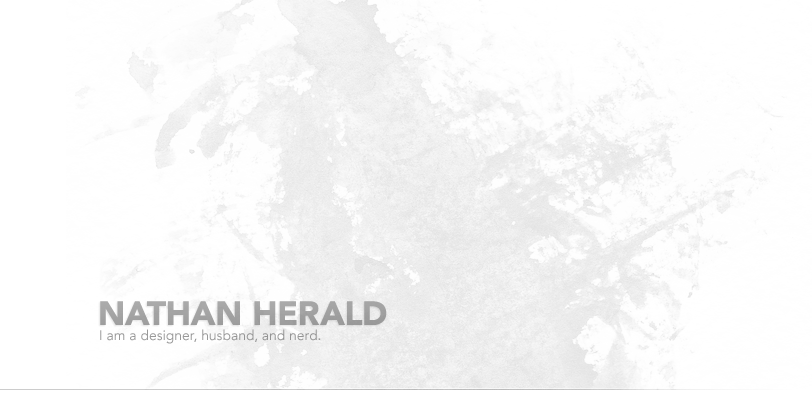
<style>
.page{position:relative;width:812px;height:400px;background:#ffffff}
.page>*{position:absolute;margin:0}
.t1{font:33.3px "AvenirLTStd-Black";color:#a2a2a2}
.t2{font:13.9px "AvenirLTStd-Roman";color:#999999}
</style>
<div class="page">
<p class="t1" style="left:100px;top:301px;width:287px;height:24px">NATHAN HERALD</p>
<p class="t2" style="left:100px;top:329px;width:221px;height:15px">I am a designer, husband, and nerd.</p>
</div>
